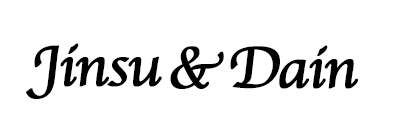
<style>
.page{position:relative;width:395px;height:132px;background:#ffffff}
.page>*{position:absolute;margin:0}
.t1{font:60px "Apple-Chancery";letter-spacing:-0.05em;color:#000000;font-weight:bold}
</style>
<div class="page">
<p class="t1" style="left:26px;top:43px;width:136px;height:56px">Jinsu</p>
<p class="t1" style="left:170px;top:46px;width:54px;height:43px">&amp;</p>
<p class="t1" style="left:230px;top:45px;width:128px;height:44px">Dain</p>
</div>
